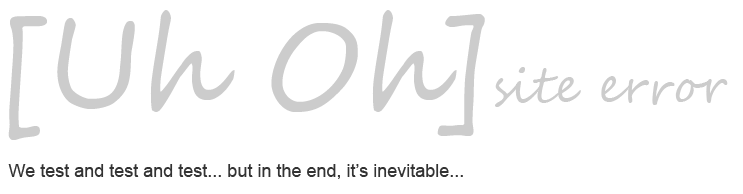
<style>
.page{position:relative;width:743px;height:194px;background:#ffffff}
.page>*{position:absolute;margin:0}
.t1{font:120px "SegoeScript";color:#cccccc}
.t2{font:48px "SegoeScript";color:#cccccc}
.t3{font:18px "ArialMT";color:#333333}
</style>
<div class="page">
<p class="t1" style="left:8px;top:10px;width:477px;height:130px">[Uh Oh]</p>
<p class="t2" style="left:495px;top:67px;width:233px;height:40px">site error</p>
<p class="t3" style="left:8px;top:164px;width:455px;height:15px">We test and test and test... but in the end, it’s inevitable...</p>
</div>
